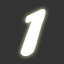
<style>
.page{position:relative;width:64px;height:64px;background:#333333}
.page>*{position:absolute;margin:0}
.t1{font:72px "ForteMT";color:#ffffff}
</style>
<div class="page">
<p class="t1" style="left:20px;top:9px;width:26px;height:47px">1</p>
</div>
